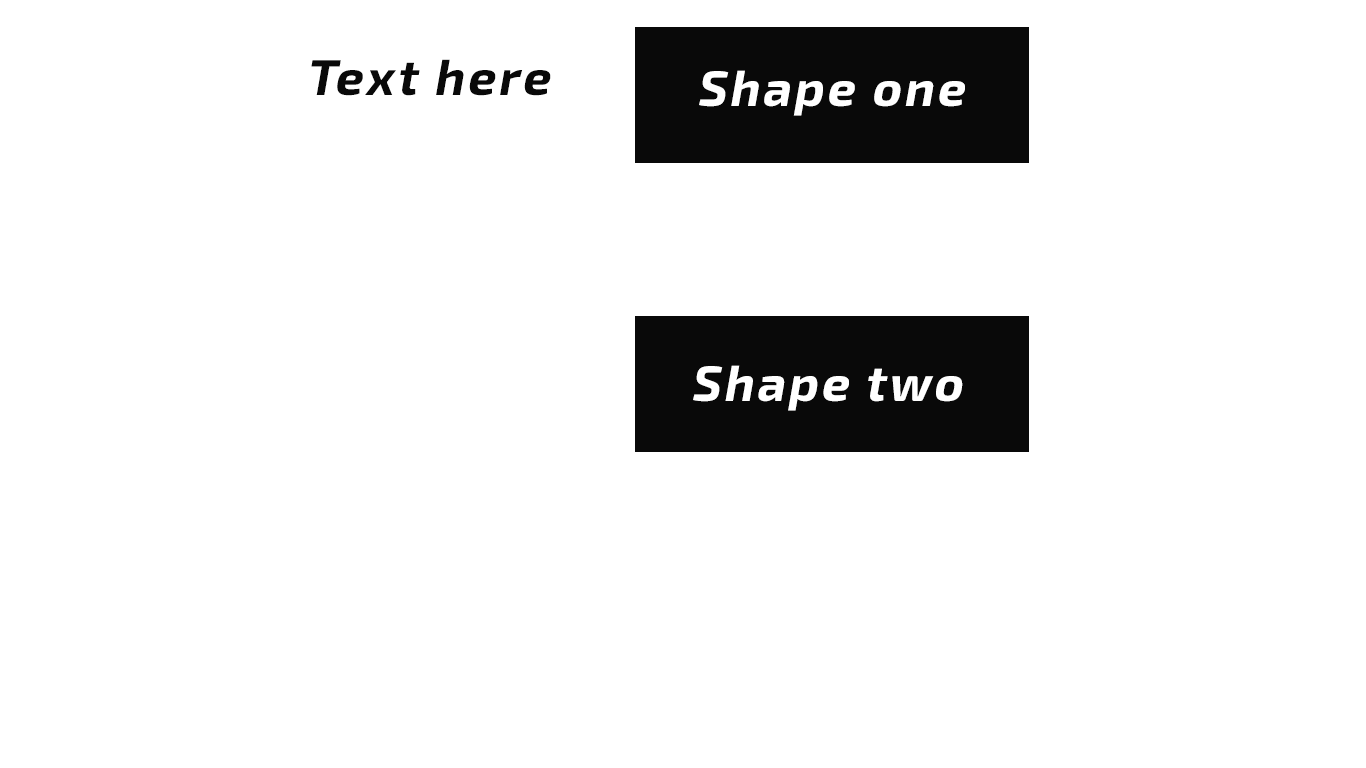
<style>
.page{position:relative;width:1366px;height:768px;background:#ffffff}
.page>*{position:absolute;margin:0}
.t1{font:50px "Exo2-Bold";letter-spacing:0.06em;color:#090909;font-style:italic}
.t2{font:50px "Exo2-Bold";letter-spacing:0.06em;color:#ffffff;font-style:italic}
</style>
<div class="page">
<p class="t1" style="left:311px;top:59px;width:240px;height:37px">Text here</p>
<p class="t2" style="left:699px;top:70px;width:266px;height:46px">Shape one</p>
<p class="t2" style="left:693px;top:365px;width:270px;height:46px">Shape two</p>
</div>
